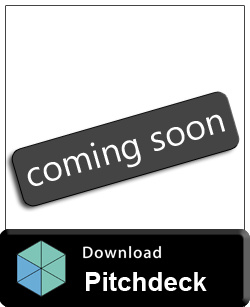
<style>
.page{position:relative;width:250px;height:307px;background:#ffffff}
.page>*{position:absolute;margin:0}
.t1{font:36px "SegoeUI";color:#ffffff}
.t2{font:26px "Arial-BoldMT";color:#ffffff}
</style>
<div class="page">
<p class="t1" style="left:27px;top:114px;width:198px;height:72px;rotate:-16deg">coming soon</p>
<p class="t2" style="left:86px;top:272px;width:121px;height:19px">Pitchdeck</p>
</div>
